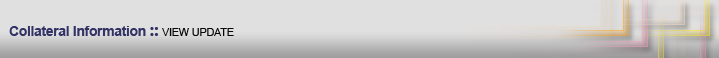
<style>
.page{position:relative;width:719px;height:58px;background:#e1e0e0}
.page>*{position:absolute;margin:0}
.t1{font:14px "Arial-BoldMT";letter-spacing:-0.025em;color:#333366}
.t2{font:18px "SegoeUI-Bold";letter-spacing:-0.025em;color:#333366}
.t3{font:11px "ArialMT";letter-spacing:-0.025em;color:#070707}
</style>
<div class="page">
<p class="t1" style="left:9px;top:26px;width:225px;height:10px">Collateral Information <span class="t2">:: </span><span class="t3">VIEW UPDATE</span></p>
</div>
